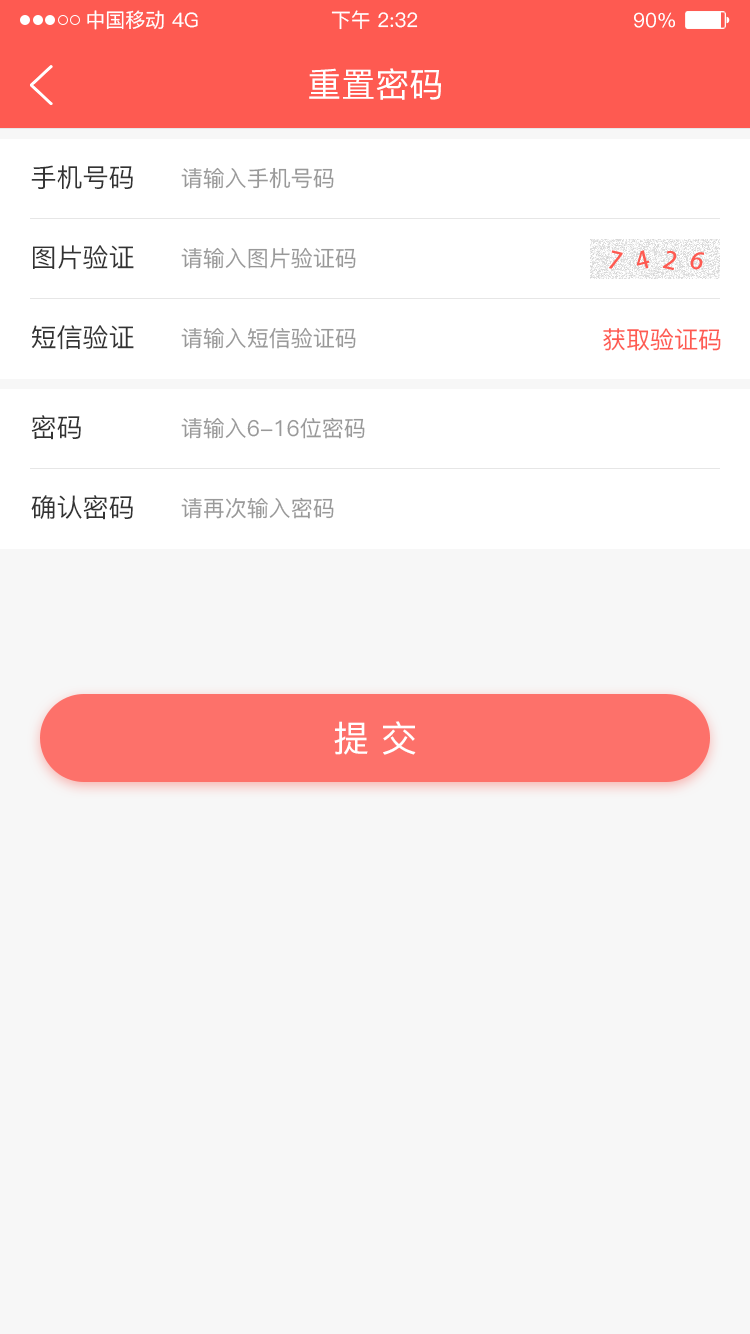
<style>
.page{position:relative;width:750px;height:1334px;background:#f7f7f7}
.page>*{position:absolute;margin:0}
.t1{font:20px "PingFang-SC-Medium";color:#ffffff}
.t2{font:34px "PingFang-SC-Medium";color:#ffffff}
.t3{font:26px "PingFang-SC-Medium";color:#333333}
.t4{font:22px "PingFang-SC-Medium";color:#999999}
.t5{font:24px "PingFang-SC-Medium";color:#fe5a51}
.t6{font:36px "PingFang-SC-Medium";color:#ffffff}
</style>
<div class="page">
<p class="t1" style="left:87px;top:10px;width:77px;height:20px">中国移动</p>
<p class="t1" style="left:172px;top:12px;width:26px;height:16px">4G</p>
<p class="t1" style="left:331px;top:10px;width:87px;height:20px">下午 2:32</p>
<p class="t1" style="left:634px;top:12px;width:41px;height:16px">90%</p>
<p class="t2" style="left:309px;top:68px;width:132px;height:32px">重置密码</p>
<p class="t3" style="left:31px;top:165px;width:102px;height:24px">手机号码</p>
<p class="t4" style="left:181px;top:167px;width:153px;height:22px">请输入手机号码</p>
<p class="t3" style="left:33px;top:245px;width:101px;height:25px">图片验证</p>
<p class="t4" style="left:181px;top:247px;width:175px;height:22px">请输入图片验证码</p>
<p class="t3" style="left:31px;top:325px;width:103px;height:25px">短信验证</p>
<p class="t4" style="left:181px;top:327px;width:175px;height:22px">请输入短信验证码</p>
<p class="t5" style="left:603px;top:328px;width:118px;height:23px">获取验证码</p>
<p class="t3" style="left:31px;top:415px;width:50px;height:25px">密码</p>
<p class="t4" style="left:181px;top:417px;width:184px;height:22px">请输入6-16位密码</p>
<p class="t3" style="left:31px;top:495px;width:102px;height:25px">确认密码</p>
<p class="t4" style="left:181px;top:497px;width:153px;height:22px">请再次输入密码</p>
<p class="t6" style="left:334px;top:721px;width:82px;height:34px">提 交</p>
</div>
